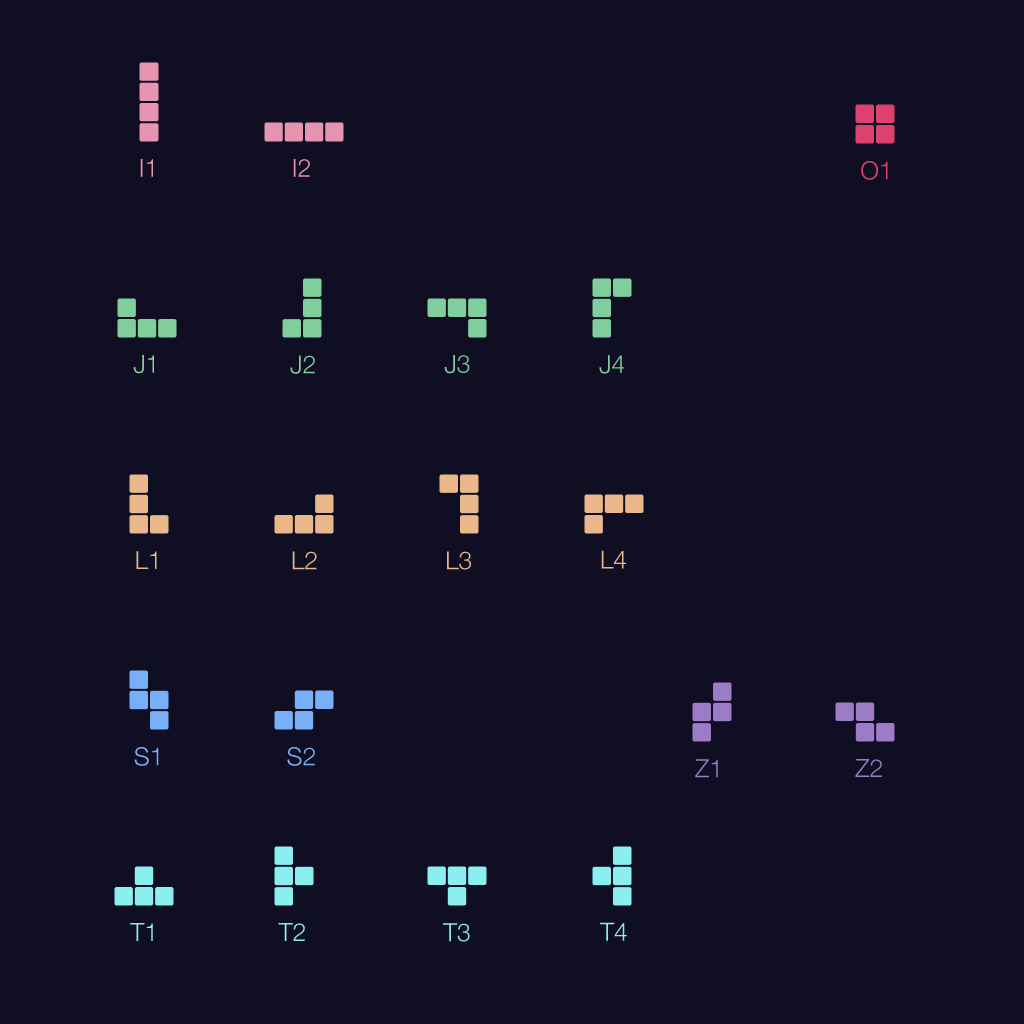
<style>
.page{position:relative;width:1024px;height:1024px;background:#100e22}
.page>*{position:absolute;margin:0}
.t1{font:25px "HelveticaNeue-Light";color:#e694b0}
.t2{font:25px "HelveticaNeue-Light";color:#dd426f}
.t3{font:25px "HelveticaNeue-Light";color:#7fce9b}
.t4{font:25px "HelveticaNeue-Light";color:#e9b789}
.t5{font:25px "HelveticaNeue-Light";color:#77b0f9}
.t6{font:25px "HelveticaNeue-Light";color:#9d7cc7}
.t7{font:25px "HelveticaNeue-Light";color:#8cefef}
</style>
<div class="page">
<p class="t1" style="left:140px;top:159px;width:13px;height:18px">I1</p>
<p class="t1" style="left:293px;top:159px;width:17px;height:18px">I2</p>
<p class="t2" style="left:861px;top:161px;width:27px;height:19px">O1</p>
<p class="t3" style="left:133px;top:355px;width:21px;height:19px">J1</p>
<p class="t3" style="left:290px;top:355px;width:25px;height:19px">J2</p>
<p class="t3" style="left:444px;top:355px;width:26px;height:19px">J3</p>
<p class="t3" style="left:599px;top:355px;width:26px;height:19px">J4</p>
<p class="t4" style="left:136px;top:551px;width:21px;height:18px">L1</p>
<p class="t4" style="left:292px;top:551px;width:25px;height:19px">L2</p>
<p class="t4" style="left:447px;top:551px;width:24px;height:19px">L3</p>
<p class="t4" style="left:601px;top:550px;width:25px;height:19px">L4</p>
<p class="t5" style="left:134px;top:747px;width:25px;height:19px">S1</p>
<p class="t5" style="left:287px;top:747px;width:28px;height:19px">S2</p>
<p class="t6" style="left:695px;top:759px;width:23px;height:19px">Z1</p>
<p class="t6" style="left:855px;top:759px;width:27px;height:18px">Z2</p>
<p class="t7" style="left:130px;top:923px;width:23px;height:18px">T1</p>
<p class="t7" style="left:278px;top:923px;width:27px;height:18px">T2</p>
<p class="t7" style="left:443px;top:923px;width:27px;height:19px">T3</p>
<p class="t7" style="left:600px;top:922px;width:27px;height:19px">T4</p>
</div>
